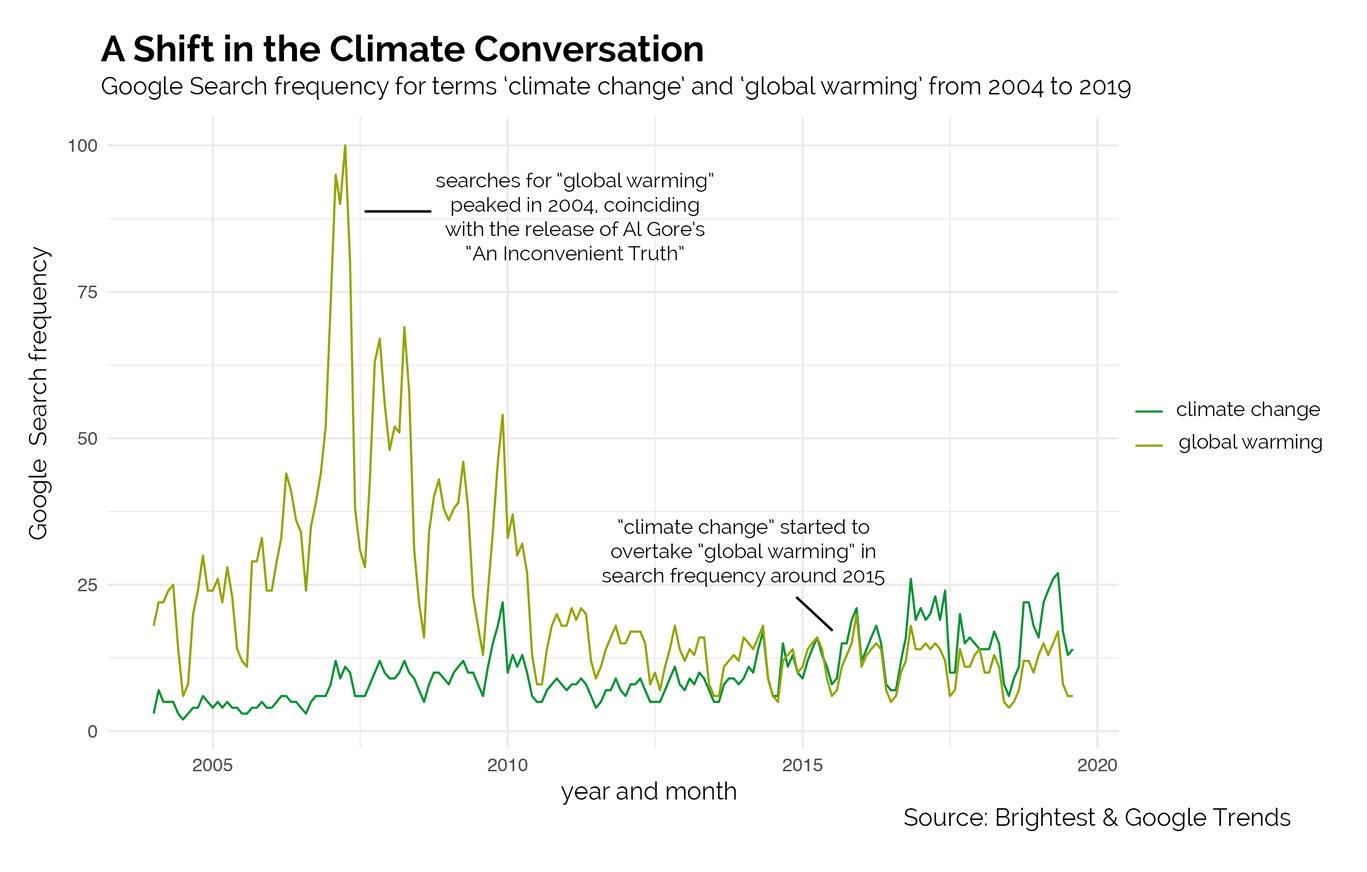
<style>
.page{position:relative;width:1367px;height:872px;background:#ffffff}
.page>*{position:absolute;margin:0}
.t1{font:36.5px "Raleway-Bold";color:#000000}
.t2{font:24.3px "Raleway";color:#000000}
.t3{font:20.3px "Raleway";color:#000000}
</style>
<div class="page">
<p class="t1" style="left:101px;top:34px;width:601px;height:28px">A Shift in the Climate Conversation</p>
<p class="t2" style="left:102px;top:76px;width:1029px;height:24px">Google Search frequency for terms ‘climate change’ and ‘global warming’ from 2004 to 2019</p>
<p class="t3" style="left:436px;top:173px;width:277px;height:87px;text-align:center">searches for “global warming” peaked in 2004, coinciding with the release of Al Gore’s “An Inconvenient Truth”</p>
<p class="t2" style="left:28px;top:247px;width:24px;height:293px;rotate:-90deg">Google  Search frequency</p>
<p class="t3" style="left:1177px;top:402px;width:143px;height:19px">climate change</p>
<p class="t3" style="left:1179px;top:434px;width:143px;height:19px">global warming</p>
<p class="t3" style="left:602px;top:519px;width:283px;height:68px;text-align:center">“climate change” started to overtake “global warming” in search frequency around 2015</p>
<p class="t2" style="left:561px;top:782px;width:175px;height:23px">year and month</p>
<p class="t2" style="left:904px;top:808px;width:387px;height:23px">Source: Brightest &amp; Google Trends</p>
</div>
